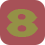
<style>
.page{position:relative;width:45px;height:45px;background:#a75157}
.page>*{position:absolute;margin:0}
.t1{font:50px "Saddlebag-Black";color:#949146}
</style>
<div class="page">
<p class="t1" style="left:6px;top:9px;width:32px;height:28px">8</p>
</div>
